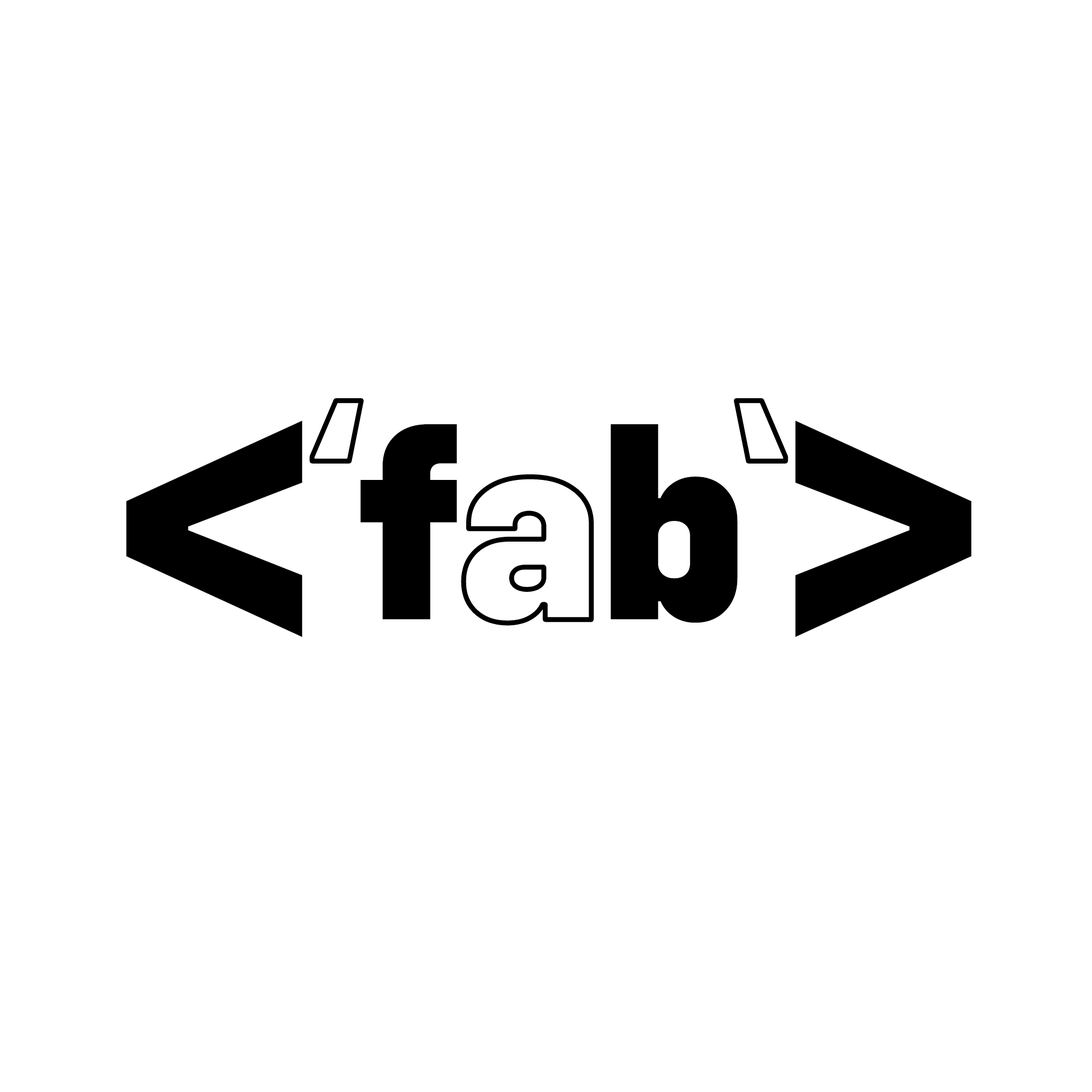
<style>
.page{position:relative;width:1092px;height:1092px;background:#ffffff}
.page>*{position:absolute;margin:0}
.t1{font:454px "Config-Bold";color:#000000}
.t2{font:278.5px "Config-ExtraBold";color:#000000}
</style>
<div class="page">
<p class="t1" style="left:126px;top:420px;width:176px;height:217px">&lt;</p>
<p class="t2" style="left:360px;top:424px;width:378px;height:199px">f b</p>
<p class="t1" style="left:795px;top:420px;width:176px;height:217px;rotate:180deg">&lt;</p>
</div>
